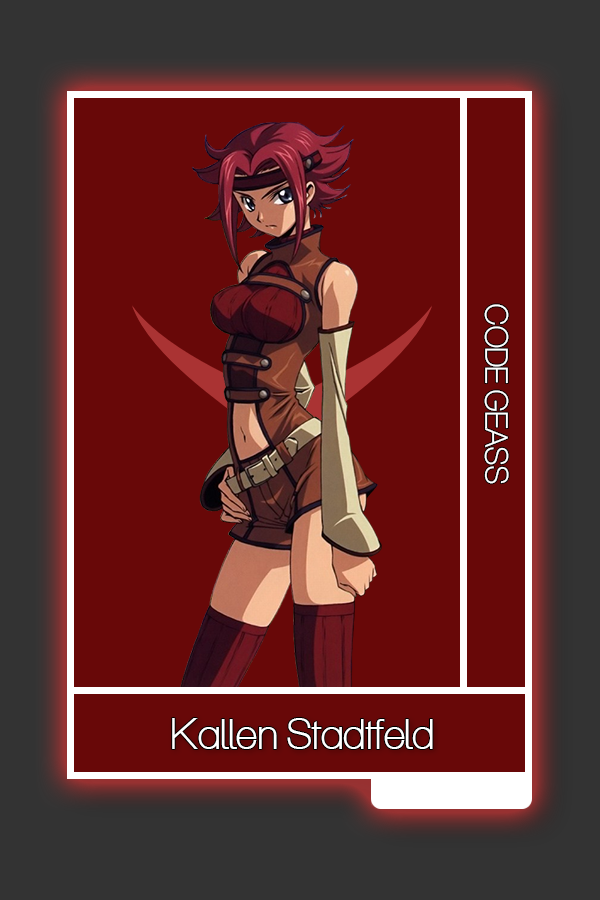
<style>
.page{position:relative;width:600px;height:900px;background:#680808}
.page>*{position:absolute;margin:0}
.t1{font:31.2px "Aliquam";color:#ffffff}
.t2{font:43.2px "Aliquam";color:#ffffff}
</style>
<div class="page">
<p class="t1" style="left:484px;top:304px;width:25px;height:180px;rotate:90deg">CODE GEASS</p>
<p class="t2" style="left:172px;top:718px;width:261px;height:31px">Kallen Stadtfeld</p>
</div>
